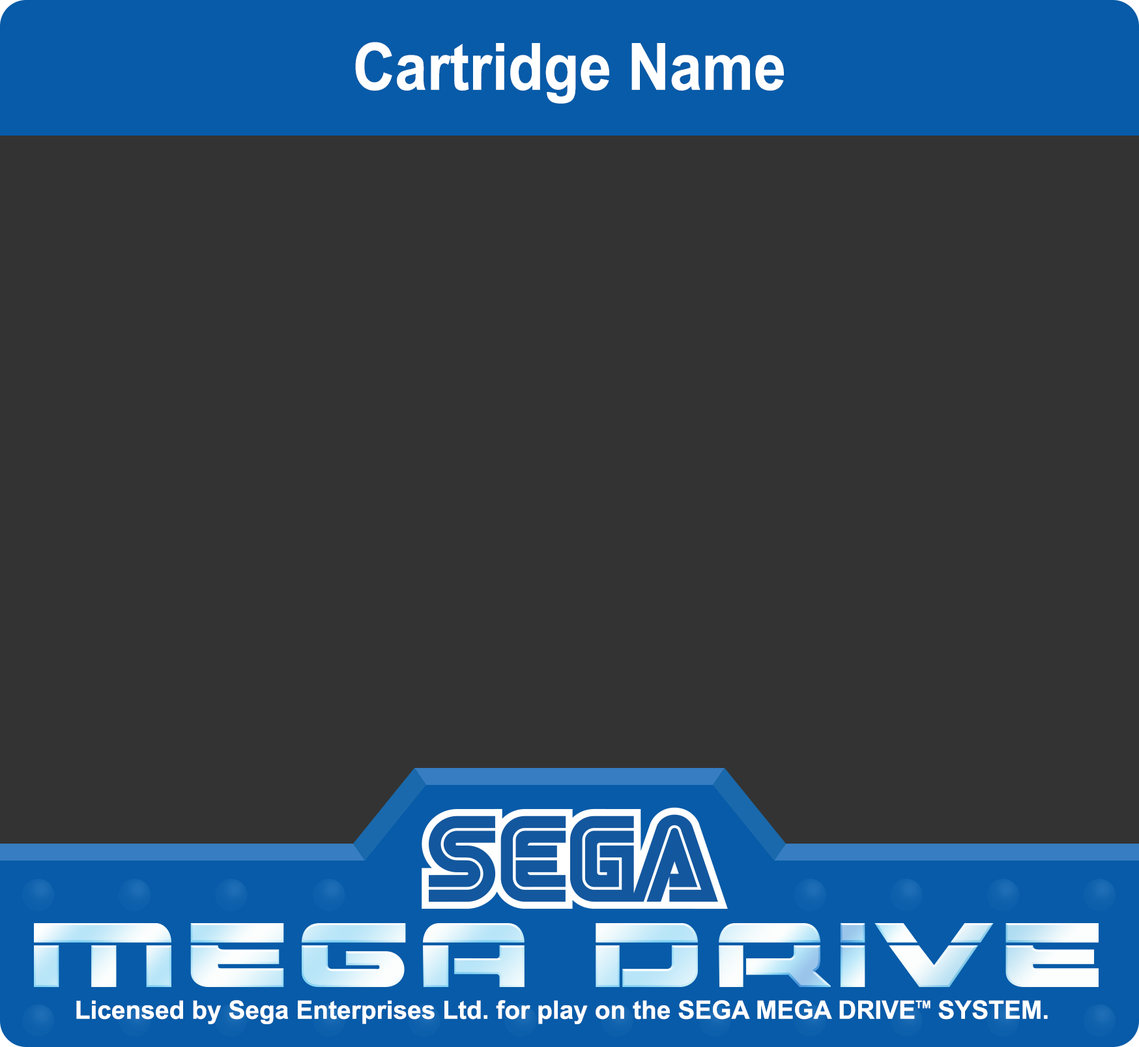
<style>
.page{position:relative;width:1139px;height:1047px;background:#333333}
.page>*{position:absolute;margin:0}
.t1{font:65.2px "Arial-BoldMT";color:#ffffff;scale:0.89 1}
.t2{font:25.4px "Arial-BoldMT";color:#ffffff}
.t3{font:10.6px "Arial-BoldMT";color:#ffffff}
</style>
<div class="page">
<p class="t1" style="left:355px;top:42px;width:429px;height:62px">Cartridge Name</p>
<p class="t2" style="left:76px;top:1000px;width:972px;height:24px">Licensed by Sega Enterprises Ltd. for play on the SEGA MEGA DRIVE<span class="t3">TM</span> SYSTEM.</p>
</div>
